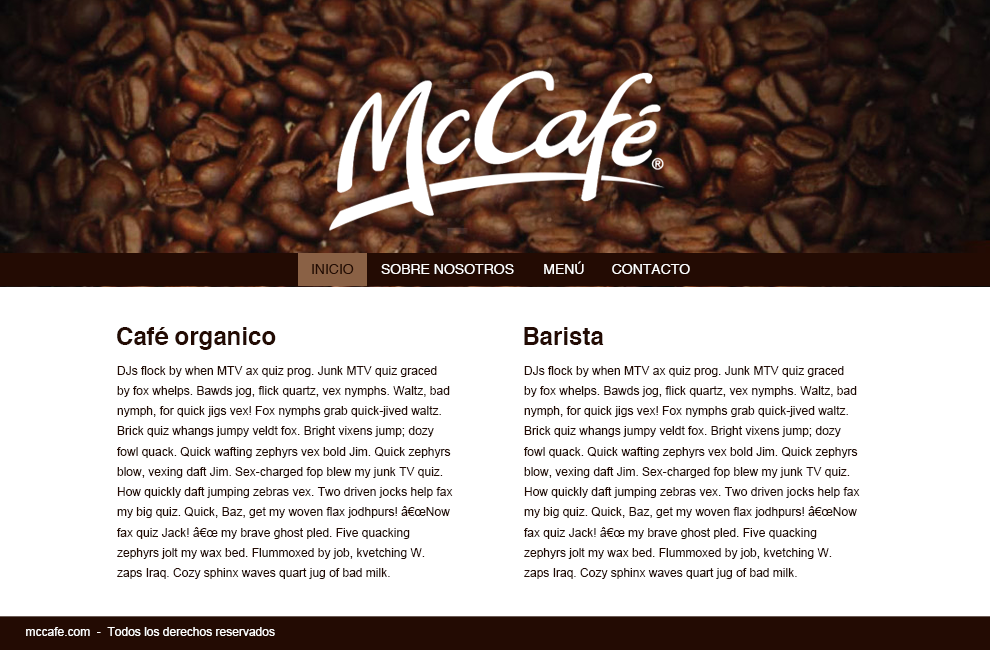
<style>
.page{position:relative;width:990px;height:650px;background:#ffffff}
.page>*{position:absolute;margin:0}
.t1{font:14px "Helvetica";color:#ffffff;text-transform:uppercase}
.t2{font:14px "Helvetica";color:#230b03;text-transform:uppercase}
.t3{font:24px "Helvetica-Bold";color:#230b03}
.t4{font:12px/20.2px "ArialMT";color:#230b03}
.t5{font:12px "ArialMT";color:#ffffff}
</style>
<div class="page">
<p class="t1" style="left:312px;top:261px;width:378px;height:13px"><span class="t2">Inicio       </span>Sobre Nosotros       Menú       Contacto</p>
<p class="t3" style="left:117px;top:327px;width:159px;height:23px">Café organico</p>
<p class="t3" style="left:524px;top:327px;width:80px;height:18px">Barista</p>
<p class="t4" style="left:117px;top:366px;width:336px;height:213px">DJs flock by when MTV ax quiz prog. Junk MTV quiz graced by fox whelps. Bawds jog, flick quartz, vex nymphs. Waltz, bad nymph, for quick jigs vex! Fox nymphs grab quick-jived waltz. Brick quiz whangs jumpy veldt fox. Bright vixens jump; dozy fowl quack. Quick wafting zephyrs vex bold Jim. Quick zephyrs blow, vexing daft Jim. Sex-charged fop blew my junk TV quiz. How quickly daft jumping zebras vex. Two driven jocks help fax my big quiz. Quick, Baz, get my woven flax jodhpurs! â€œNow fax quiz Jack! â€œ my brave ghost pled. Five quacking zephyrs jolt my wax bed. Flummoxed by job, kvetching W. zaps Iraq. Cozy sphinx waves quart jug of bad milk.</p>
<p class="t4" style="left:524px;top:366px;width:336px;height:213px">DJs flock by when MTV ax quiz prog. Junk MTV quiz graced by fox whelps. Bawds jog, flick quartz, vex nymphs. Waltz, bad nymph, for quick jigs vex! Fox nymphs grab quick-jived waltz. Brick quiz whangs jumpy veldt fox. Bright vixens jump; dozy fowl quack. Quick wafting zephyrs vex bold Jim. Quick zephyrs blow, vexing daft Jim. Sex-charged fop blew my junk TV quiz. How quickly daft jumping zebras vex. Two driven jocks help fax my big quiz. Quick, Baz, get my woven flax jodhpurs! â€œNow fax quiz Jack! â€œ my brave ghost pled. Five quacking zephyrs jolt my wax bed. Flummoxed by job, kvetching W. zaps Iraq. Cozy sphinx waves quart jug of bad milk.</p>
<p class="t5" style="left:26px;top:627px;width:249px;height:9px">mccafe.com  -  Todos los derechos reservados</p>
</div>
